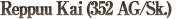
<style>
.page{position:relative;width:184px;height:19px;background:#ffffff}
.page>*{position:absolute;margin:0}
.t1{font:18px "RyuminPro-ExBold";letter-spacing:-0.08em;color:#4a3f32;font-weight:bold;scale:0.9 1}
</style>
<div class="page">
<p class="t1" style="left:0px;top:0px;width:172px;height:19px">Reppuu Kai (352 AG/Sk.)</p>
</div>
